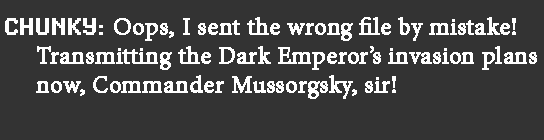
<style>
.page{position:relative;width:544px;height:140px;background:#333333}
.page>*{position:absolute;margin:0}
.t1{font:24px "MinionPro-Regular";color:#ffffff;font-weight:bold}
.t2{font:24px "SynchroLET";color:#ffffff;font-weight:bold}
</style>
<div class="page">
<p class="t1" style="left:5px;top:17px;width:532px;height:82px"><span class="t2">CHUNKY: </span>Oops, I sent the wrong file by mistake! <br>     Transmitting the Dark Emperor’s invasion plans<br>     now, Commander Mussorgsky, sir!</p>
</div>
